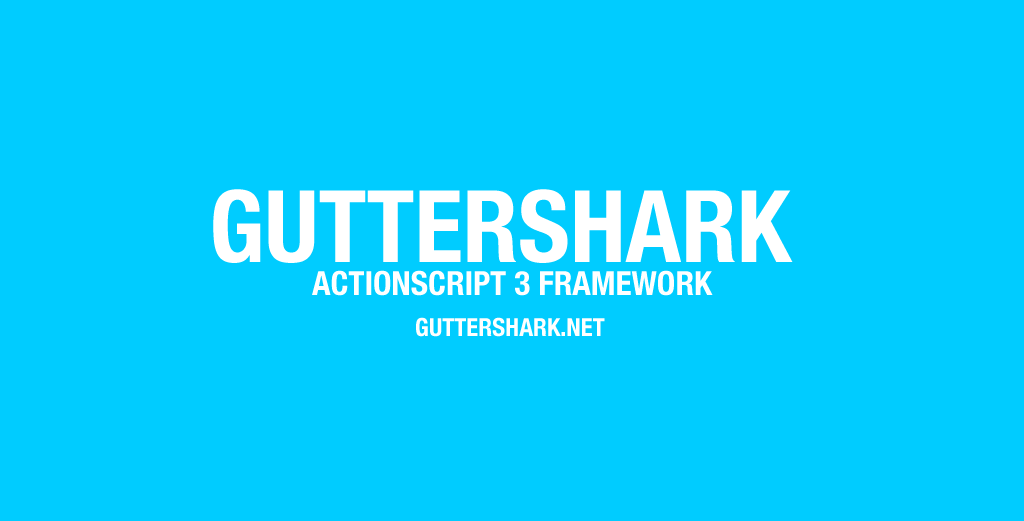
<style>
.page{position:relative;width:1024px;height:521px;background:#00ccff}
.page>*{position:absolute;margin:0}
.t1{font:100px "HelveticaNeue-CondensedBold";color:#ffffff}
.t2{font:33.3px "HelveticaNeue-CondensedBold";color:#ffffff}
.t3{font:25px "HelveticaNeue-CondensedBold";color:#ffffff}
</style>
<div class="page">
<p class="t1" style="left:213px;top:189px;width:580px;height:74px">GUTTERSHARK</p>
<p class="t2" style="left:312px;top:270px;width:401px;height:26px">ACTIONSCRIPT 3 FRAMEWORK</p>
<p class="t3" style="left:416px;top:317px;width:189px;height:20px">GUTTERSHARK.NET</p>
</div>
